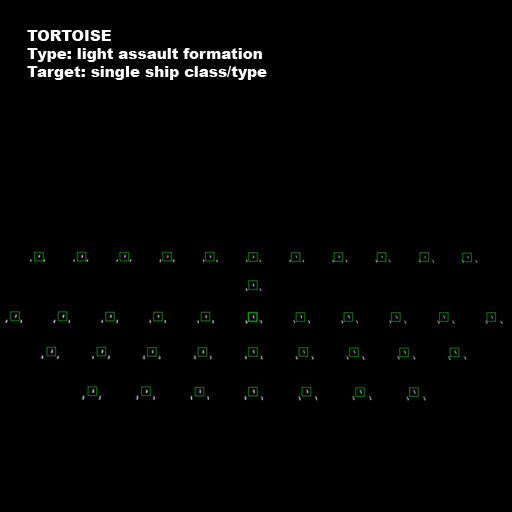
<style>
.page{position:relative;width:512px;height:512px;background:#000000}
.page>*{position:absolute;margin:0}
.t1{font:15px "Arial-Black";color:#ffffff}
</style>
<div class="page">
<p class="t1" style="left:27px;top:30px;width:240px;height:50px">TORTOISE<br>Type: light assault formation<br>Target: single ship class/type</p>
</div>
